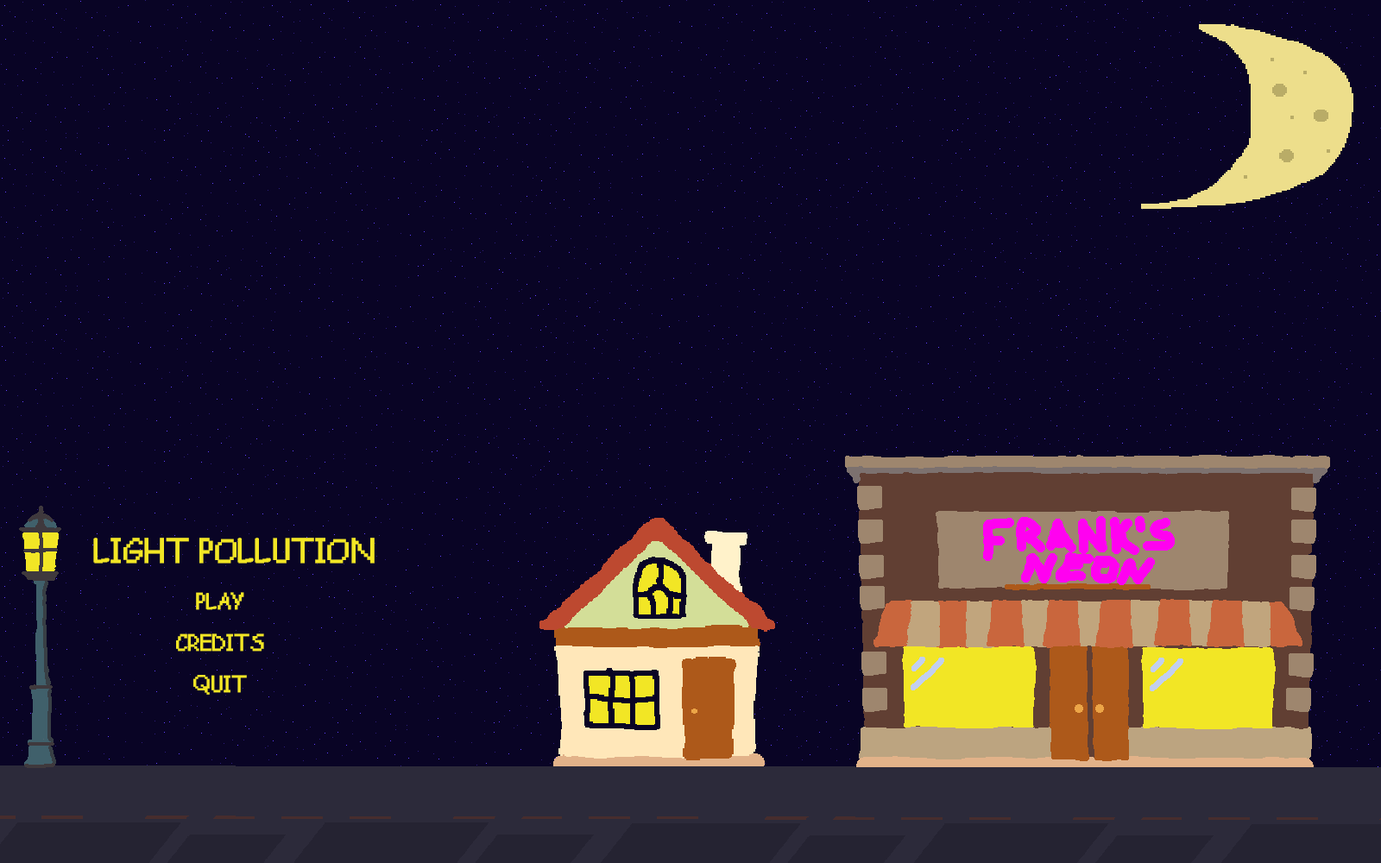
<style>
.page{position:relative;width:1381px;height:863px;background:#090425}
.page>*{position:absolute;margin:0}
.t1{font:31.1px "PixelComicSans-Regular";color:#f2e625;font-weight:bold}
.t2{font:20.7px/41.4px "PixelComicSans-Regular";color:#f2e625;font-weight:bold}
</style>
<div class="page">
<p class="t1" style="left:93px;top:538px;width:282px;height:26px">LIGHT POLLUTION</p>
<p class="t2" style="left:176px;top:592px;width:88px;height:103px;text-align:center">PLAY<br>CREDITS<br>QUIT</p>
</div>
